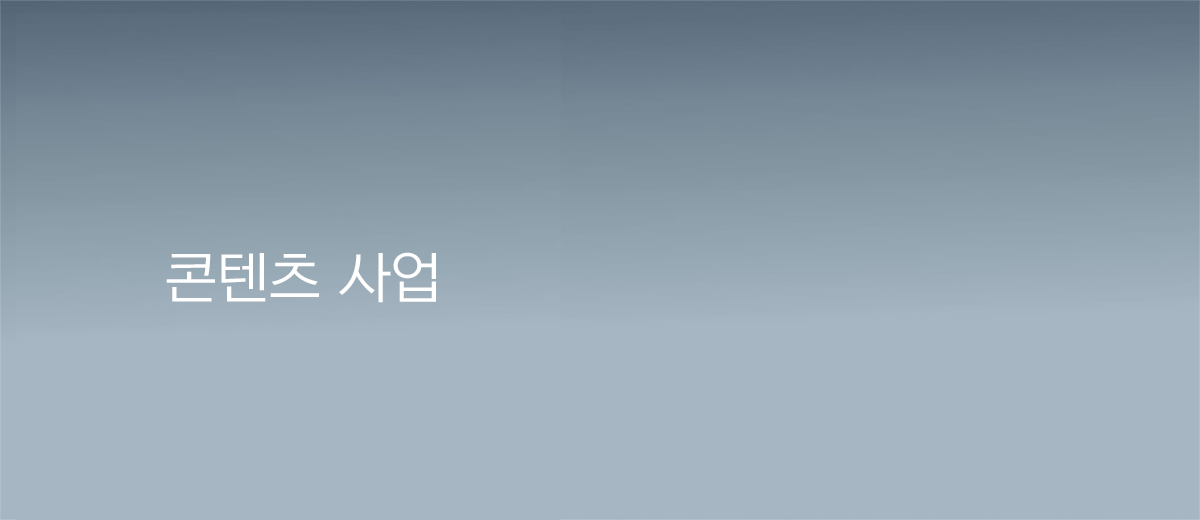
<style>
.page{position:relative;width:1200px;height:520px;background:#a6b6c3}
.page>*{position:absolute;margin:0}
.t1{font:55px "NEXONLv1GothicLowOTFRegular";color:#ffffff}
</style>
<div class="page">
<p class="t1" style="left:166px;top:252px;width:270px;height:51px">콘텐츠 사업</p>
</div>
